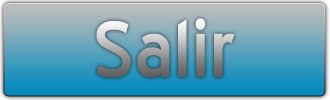
<style>
.page{position:relative;width:330px;height:100px}
.page>*{position:absolute;margin:0}
.t1{font:100.6px "BlueHighway"}
</style>
<div class="page">
<p class="t1" style="left:96px;top:18px;width:139px;height:60px">Salir</p>
</div>
